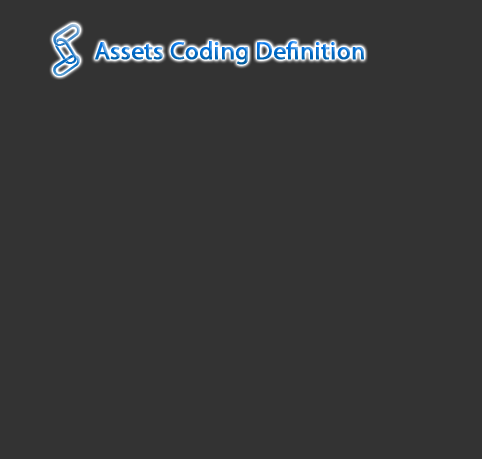
<style>
.page{position:relative;width:482px;height:459px;background:#333333}
.page>*{position:absolute;margin:0}
.t1{font:25px "MyriadPro-Regular";font-weight:bold}
</style>
<div class="page">
<p class="t1" style="left:95px;top:41px;width:269px;height:24px">Assets Coding Definition</p>
</div>
